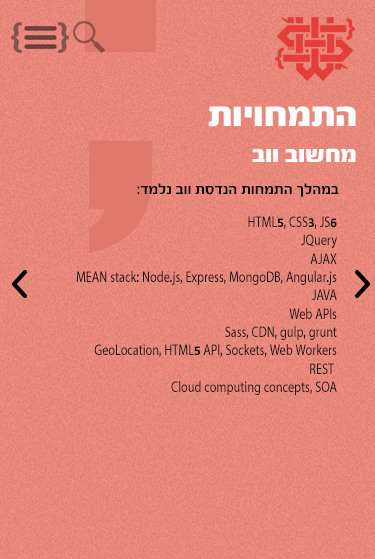
<style>
.page{position:relative;width:375px;height:559px}
.page>*{position:absolute;margin:0}
.t1{font:37.2px "FbScorpion-Black";color:#ffffff}
.t2{font:25px "FbScorpion-Black";color:#ffffff}
.t3{font:15.3px "FbScorpion-Bold";color:#080808}
.t4{font:15.3px "MyriadHebrew-Regular";color:#080808;scale:0.8 1}
.t5{font:15.3px "FbScorpion-Bold";color:#080808;scale:0.8 1}
</style>
<div class="page">
<p class="t1" style="left:208px;top:106px;width:148px;height:21px">תויוחמתה</p>
<p class="t2" style="left:252px;top:148px;width:104px;height:14px">בוו בושחמ</p>
<p class="t3" style="left:137px;top:183px;width:202px;height:14px">:דמלנ בוו תסדנה תוחמתה ךלהמב</p>
<p class="t4" style="left:76px;top:216px;width:261px;height:179px;text-align:right">HTML<span class="t5">5, </span>CSS<span class="t5">3, </span>JS<span class="t5">6<br></span>JQuery<br>AJAX<br> MEAN stack<span class="t5">: </span>Node<span class="t5">.</span>js<span class="t5">, </span>Express<span class="t5">, </span>MongoDB<span class="t5">, </span>Angular<span class="t5">.</span>js<br>JAVA<br>Web APIs<br>Sass<span class="t5">, </span>CDN<span class="t5">, </span>gulp<span class="t5">, </span>grunt<br>GeoLocation<span class="t5">, </span>HTML<span class="t5">5 </span>API<span class="t5">, </span>Sockets<span class="t5">, </span>Web Workers<br>REST <br>Cloud computing concepts<span class="t5">, </span>SOA</p>
</div>
